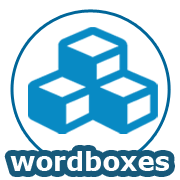
<style>
.page{position:relative;width:180px;height:180px;background:#ffffff}
.page>*{position:absolute;margin:0}
.t1{font:25.9px "Verdana-Bold";color:#ffffff}
</style>
<div class="page">
<p class="t1" style="left:10px;top:151px;width:159px;height:20px">wordboxes</p>
</div>
